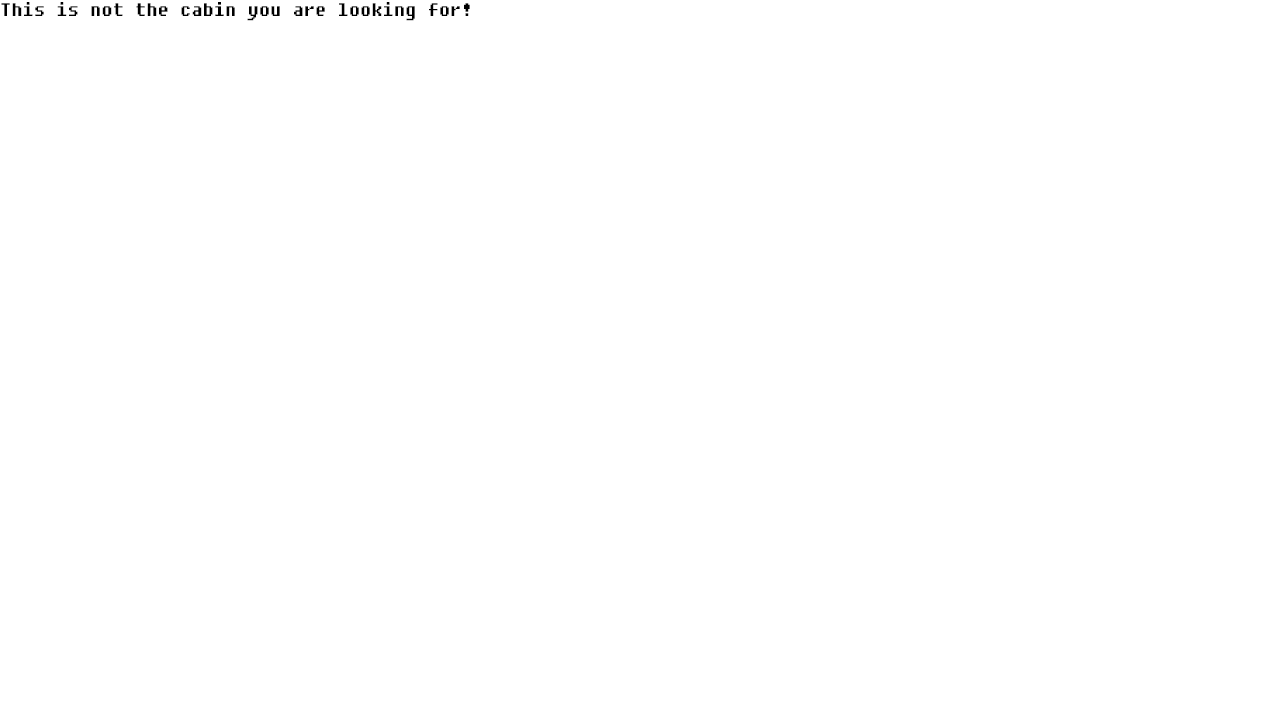
<style>
.page{position:relative;width:1280px;height:720px;background:#ffffff}
.page>*{position:absolute;margin:0}
.t1{font:18px "Fixedsys";color:#000000}
</style>
<div class="page">
<p class="t1" style="left:1px;top:2px;width:469px;height:19px">This is not the cabin you are looking for!</p>
</div>
